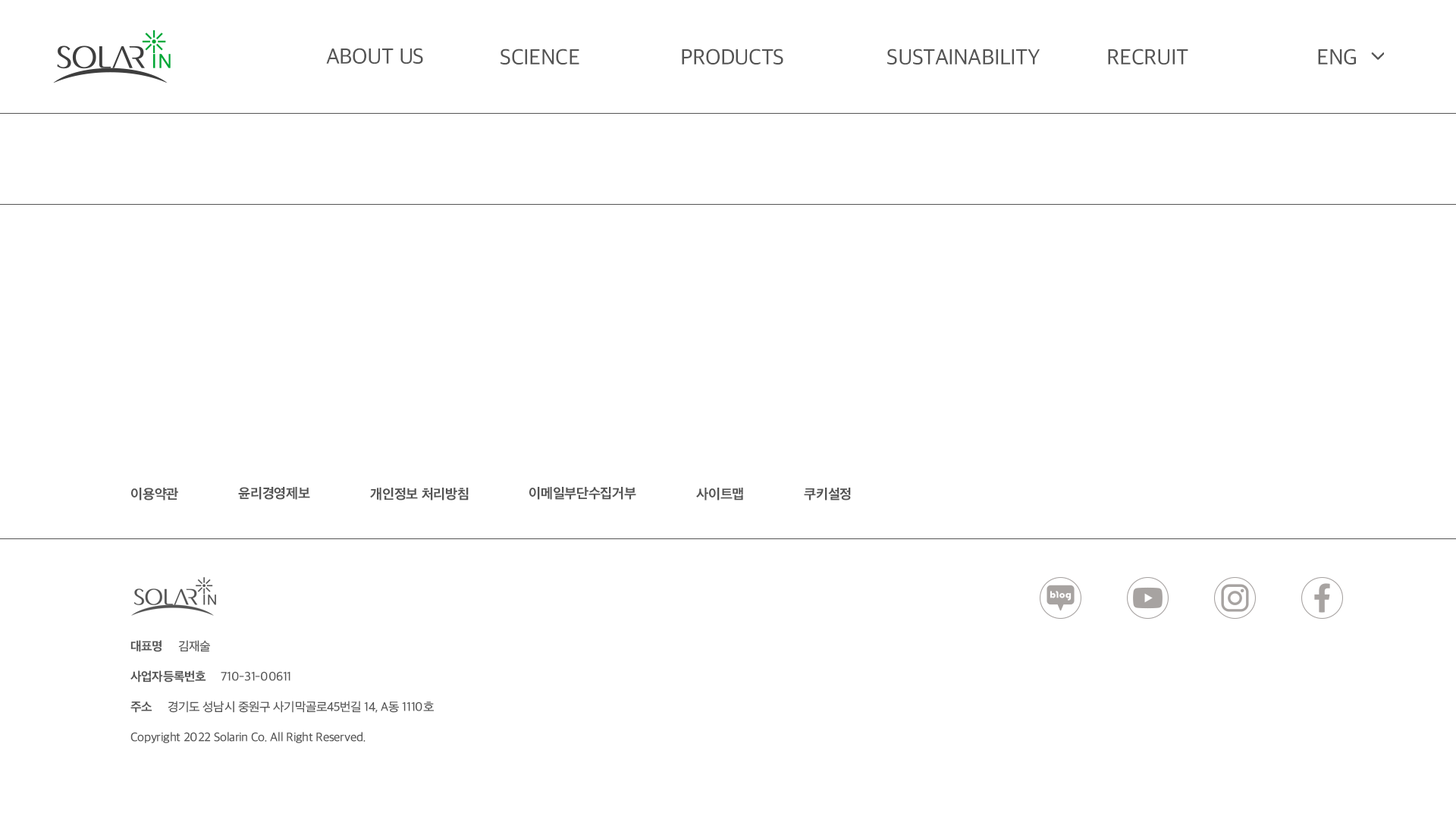
<style>
.page{position:relative;width:1456px;height:819px;background:#ffffff}
.page>*{position:absolute;margin:0}
.t1{font:22.3px "AppleSDGothicNeo-Regular";letter-spacing:-0.02em;color:#545454}
.t2{font:14px "AppleSDGothicNeo-Bold";letter-spacing:-0.02em;color:#545454}
.t3{font:12.6px/30.3px "AppleSDGothicNeo-Regular";letter-spacing:-0.02em;color:#545454}
.t4{font:12.6px/30.3px "AppleSDGothicNeo-Bold";letter-spacing:-0.02em;color:#545454}
</style>
<div class="page">
<p class="t1" style="left:326px;top:48px;width:97px;height:16px">ABOUT US</p>
<p class="t1" style="left:500px;top:49px;width:79px;height:16px">SCIENCE</p>
<p class="t1" style="left:682px;top:49px;width:101px;height:16px">PRODUCTS</p>
<p class="t1" style="left:887px;top:49px;width:153px;height:16px">SUSTAINABILITY</p>
<p class="t1" style="left:1108px;top:49px;width:80px;height:16px">RECRUIT</p>
<p class="t1" style="left:1318px;top:49px;width:38px;height:16px">ENG</p>
<p class="t2" style="left:130px;top:488px;width:48px;height:12px">이용약관</p>
<p class="t2" style="left:238px;top:487px;width:72px;height:13px">윤리경영제보</p>
<p class="t2" style="left:370px;top:488px;width:99px;height:12px">개인정보 처리방침</p>
<p class="t2" style="left:529px;top:487px;width:107px;height:13px">이메일부단수집거부</p>
<p class="t2" style="left:696px;top:488px;width:47px;height:12px">사이트맵</p>
<p class="t2" style="left:804px;top:488px;width:47px;height:12px">쿠키설정</p>
<p class="t3" style="left:130px;top:640px;width:304px;height:103px"><span class="t4">대표명</span>     김재술<br><span class="t4">사업자등록번호</span>     710-31-00611<br><span class="t4">주소</span>     경기도 성남시 중원구 사기막골로45번길 14, A동 1110호<br>Copyright 2022 Solarin Co. All Right Reserved.</p>
</div>
